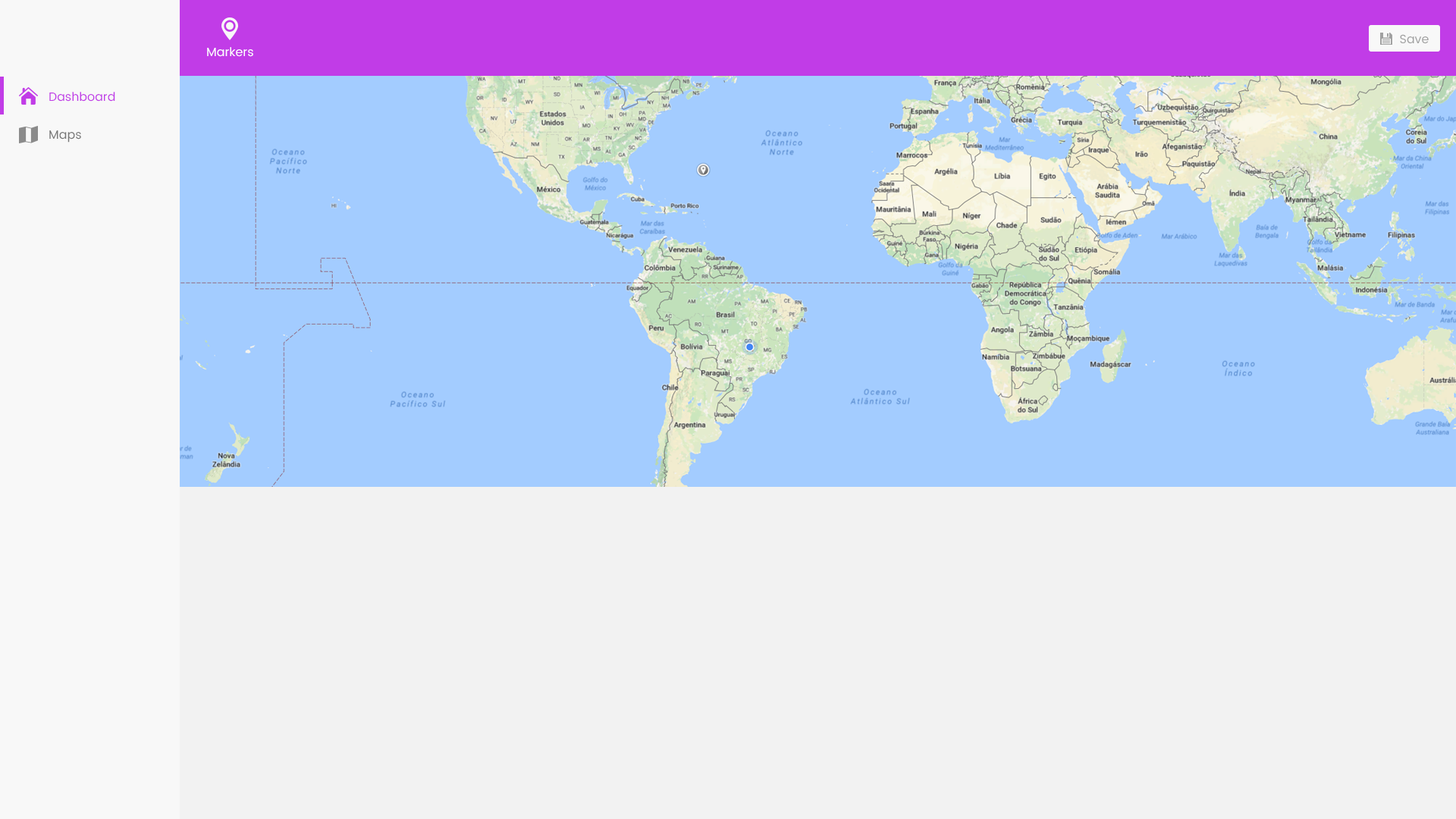
<style>
.page{position:relative;width:1456px;height:819px;background:#f2f2f2}
.page>*{position:absolute;margin:0}
.t1{font:12.1px "Poppins-Regular";color:#a1a1a1}
.t2{font:12.1px "Poppins-Regular";color:#ffffff}
.t3{font:12.1px "Poppins-Regular";color:#c13ce7}
.t4{font:12.1px "Poppins-Regular";color:#767676}
</style>
<div class="page">
<p class="t1" style="left:1400px;top:34px;width:29px;height:10px">Save</p>
<p class="t2" style="left:207px;top:47px;width:46px;height:10px">Markers</p>
<p class="t3" style="left:49px;top:92px;width:66px;height:10px">Dashboard</p>
<p class="t4" style="left:49px;top:130px;width:32px;height:13px">Maps</p>
</div>
